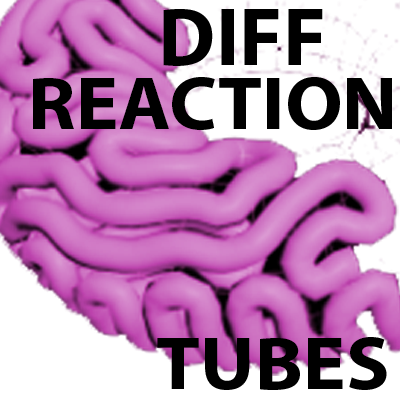
<style>
.page{position:relative;width:400px;height:400px;background:#ffffff}
.page>*{position:absolute;margin:0}
.t1{font:82.4px "MyriadPro-Bold";color:#000000}
.t2{font:75.4px "MyriadPro-Bold";color:#000000;scale:1.06 1}
</style>
<div class="page">
<p class="t1" style="left:163px;top:9px;width:160px;height:57px">DIFF</p>
<p class="t2" style="left:33px;top:77px;width:359px;height:53px">REACTION</p>
<p class="t2" style="left:157px;top:337px;width:230px;height:53px">TUBES</p>
</div>
